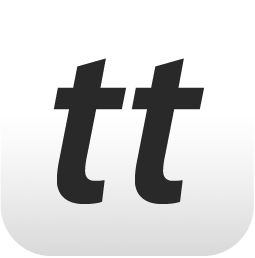
<style>
.page{position:relative;width:255px;height:258px;background:#ffffff}
.page>*{position:absolute;margin:0}
.t1{font:235.1px "MyriadPro-SemiboldIt";color:#292929}
</style>
<div class="page">
<p class="t1" style="left:53px;top:58px;width:151px;height:146px">tt</p>
</div>
